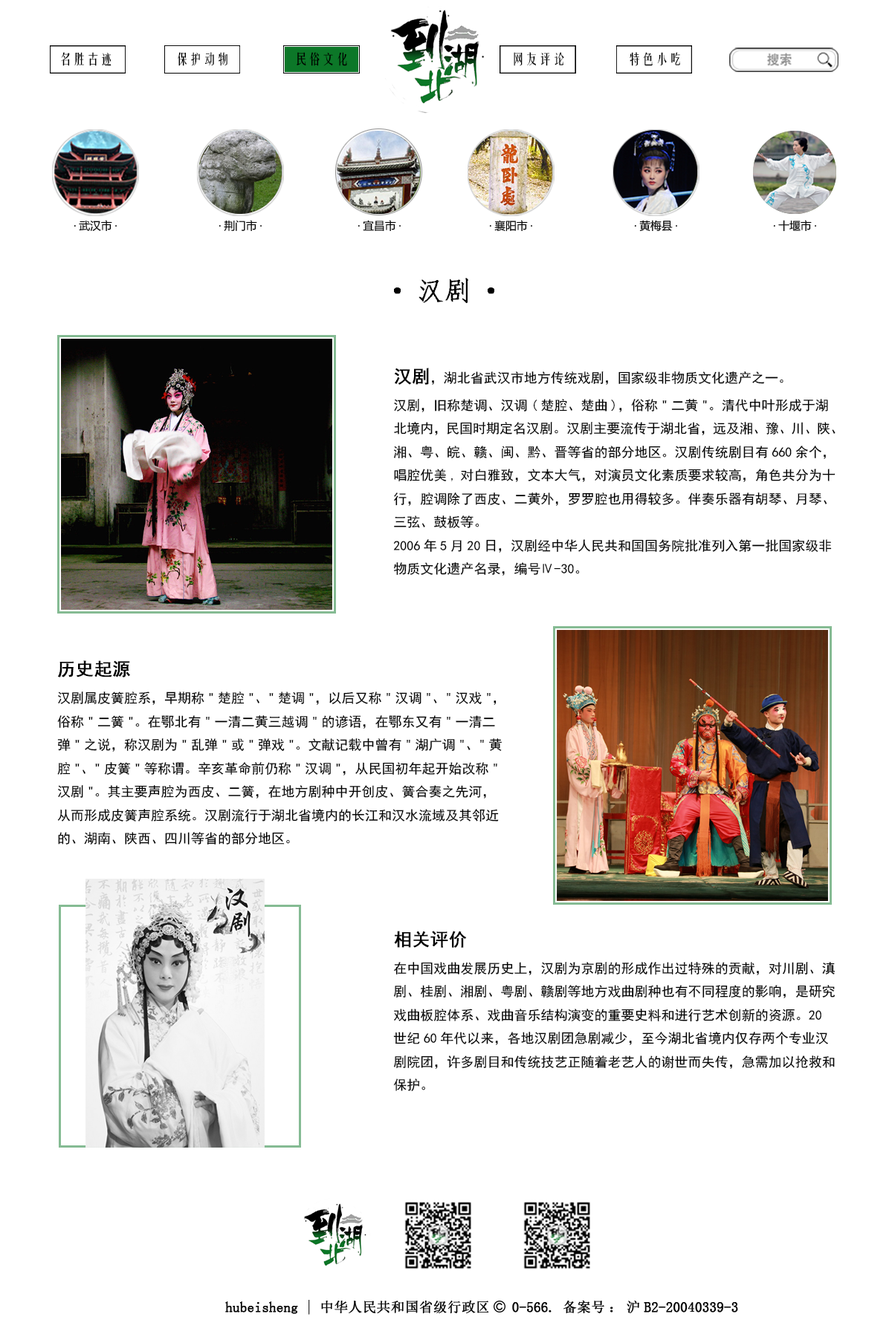
<style>
.page{position:relative;width:892px;height:1337px;background:#ffffff}
.page>*{position:absolute;margin:0}
.t1{font:13.6px "FZYTK--GBK1-0";color:#000000}
.t2{font:26.7px "·ÂËÎ";color:#000000;font-weight:bold}
.t3{font:13.4px "SimHei";color:#000000}
.t4{font:17.8px "SimHei";color:#000000;font-weight:bold}
</style>
<div class="page">
<p class="t1" style="left:61px;top:52px;width:50px;height:14px">名胜古迹</p>
<p class="t1" style="left:178px;top:52px;width:49px;height:14px">保护动物</p>
<p class="t1" style="left:296px;top:52px;width:51px;height:14px">民俗文化</p>
<p class="t1" style="left:513px;top:52px;width:51px;height:14px">网友评论</p>
<p class="t1" style="left:629px;top:52px;width:51px;height:14px">特色小吃</p>
<p class="t2" style="left:394px;top:278px;width:100px;height:25px">·汉剧·</p>
<p class="t3" style="left:393px;top:368px;width:442px;height:208px"><span class="t4">汉剧</span>，湖北省武汉市地方传统戏剧，国家级非物质文化遗产之一。<br>汉剧，旧称楚调、汉调(楚腔、楚曲)，俗称"二黄"。清代中叶形成于湖北境内，民国时期定名汉剧。汉剧主要流传于湖北省，远及湘、豫、川、陕、湘、粤、皖、赣、闽、黔、晋等省的部分地区。 汉剧传统剧目有660余个，唱腔优美,对白雅致，文本大气，对演员文化素质要求较高， 角色共分为十行，腔调除了西皮、二黄外，罗罗腔也用得较多。伴奏乐器有胡琴、月琴、三弦、鼓板等。<br>2006年5月20日，汉剧经中华人民共和国国务院批准列入第一批国家级非物质文化遗产名录，编号Ⅳ-30。</p>
<p class="t3" style="left:57px;top:661px;width:445px;height:184px"><span class="t4">历史起源<br></span>汉剧属皮簧腔系，早期称"楚腔"、"楚调"，以后又称"汉调"、"汉戏"，俗称"二簧"。在鄂北有"一清二黄三越调"的谚语，在鄂东又有"一清二弹"之说，称汉剧为"乱弹"或"弹戏"。文献记载中曾有"湖广调"、"黄腔"、"皮簧"等称谓。辛亥革命前仍称"汉调"，从民国初年起开始改称"汉剧"。其主要声腔为西皮、二簧，在地方剧种中开创皮、簧合奏之先河，从而形成皮簧声腔系统。汉剧流行于湖北省境内的长江和汉水流域及其邻近的、湖南、陕西、四川等省的部分地区。</p>
<p class="t3" style="left:393px;top:931px;width:442px;height:160px"><span class="t4">相关评价<br></span>在中国戏曲发展历史上，汉剧为京剧的形成作出过特殊的贡献，对川剧、滇剧、桂剧、湘剧、粤剧、赣剧等地方戏曲剧种也有不同程度的影响，是研究戏曲板腔体系、戏曲音乐结构演变的重要史料和进行艺术创新的资源。20世纪60年代以来，各地汉剧团急剧减少，至今湖北省境内仅存两个专业汉剧院团，许多剧目和传统技艺正随着老艺人的谢世而失传，急需加以抢救和保护。</p>
</div>
